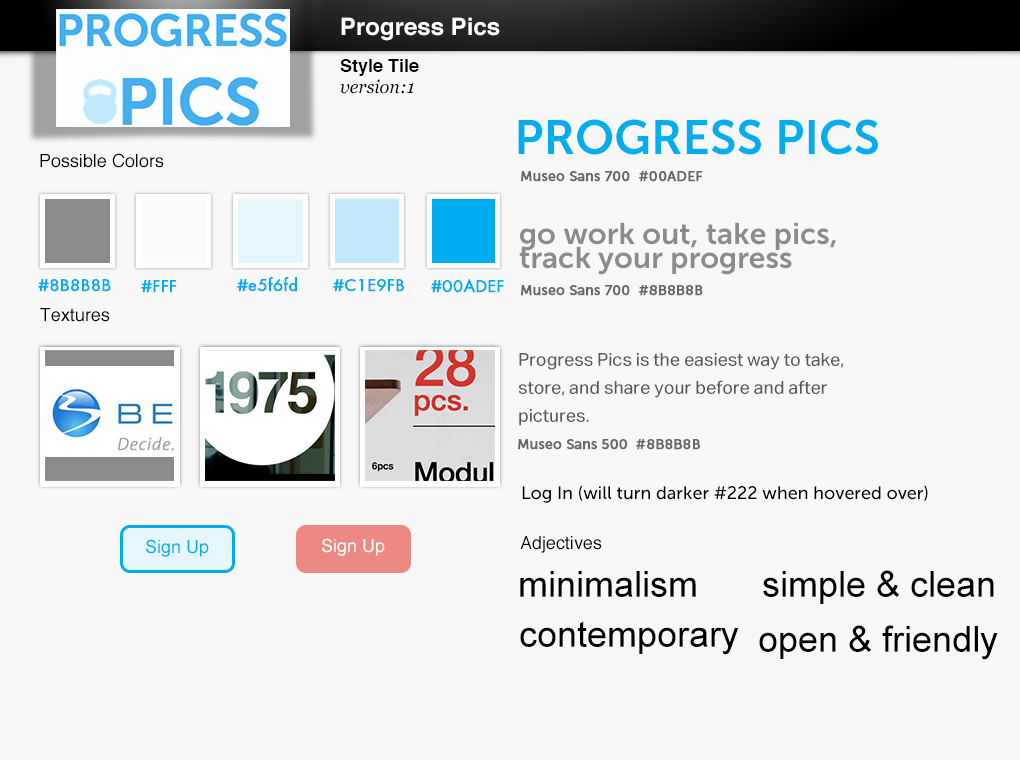
<style>
.page{position:relative;width:1020px;height:760px;background:#f8f8f8}
.page>*{position:absolute;margin:0}
.t1{font:24px "Helvetica-Bold";color:#ffffff}
.t2{font:18px "Helvetica-Bold";color:#000000}
.t3{font:18px "Georgia-Italic";color:#000000}
.t4{font:48px "MuseoSans-700";color:#00adef}
.t5{font:18px "Helvetica";color:#000000}
.t6{font:14px "MuseoSans-500";color:#666666;font-weight:bold}
.t7{font:30px/24px "MuseoSans-700";color:#8b8b8b}
.t8{font:18px "FuturaPT-Book";color:#00adef;font-weight:bold}
.t9{font:18px/28px "AktivGrotesk-Regular";color:#575757}
.t10{font:18px "MuseoSans-500";color:#000000}
.t11{font:18px "ArialMT";color:#00adef}
.t12{font:18px "ArialMT";color:#ffffff}
.t13{font:36px "ArialMT";color:#000000}
</style>
<div class="page">
<p class="t1" style="left:341px;top:17px;width:159px;height:24px">Progress Pics</p>
<p class="t2" style="left:340px;top:59px;width:79px;height:17px">Style Tile</p>
<p class="t3" style="left:340px;top:79px;width:74px;height:15px">version:1</p>
<p class="t4" style="left:518px;top:119px;width:360px;height:36px">PROGRESS PICS</p>
<p class="t5" style="left:40px;top:153px;width:124px;height:15px">Possible Colors</p>
<p class="t6" style="left:521px;top:171px;width:182px;height:11px">Museo Sans 700  #00ADEF</p>
<p class="t7" style="left:519px;top:222px;width:317px;height:53px">go work out, take pics,<br>track your progress</p>
<p class="t8" style="left:38px;top:279px;width:73px;height:13px">#8B8B8B</p>
<p class="t8" style="left:141px;top:280px;width:36px;height:13px">#FFF</p>
<p class="t8" style="left:237px;top:277px;width:60px;height:15px">#e5f6fd</p>
<p class="t8" style="left:333px;top:279px;width:71px;height:13px">#C1E9FB</p>
<p class="t8" style="left:431px;top:279px;width:73px;height:14px">#00ADEF</p>
<p class="t6" style="left:521px;top:285px;width:182px;height:11px">Museo Sans 700  #8B8B8B</p>
<p class="t5" style="left:40px;top:308px;width:70px;height:14px">Textures</p>
<p class="t9" style="left:518px;top:353px;width:326px;height:73px">Progress Pics is the easiest way to take, store, and share your before and after pictures.</p>
<p class="t6" style="left:518px;top:439px;width:182px;height:11px">Museo Sans 500  #8B8B8B</p>
<p class="t10" style="left:522px;top:485px;width:406px;height:18px">Log In (will turn darker #222 when hovered over)</p>
<p class="t11" style="left:146px;top:539px;width:63px;height:18px">Sign Up</p>
<p class="t12" style="left:322px;top:538px;width:63px;height:18px">Sign Up</p>
<p class="t5" style="left:520px;top:536px;width:82px;height:17px">Adjectives</p>
<p class="t13" style="left:520px;top:571px;width:176px;height:26px">minimalism</p>
<p class="t13" style="left:763px;top:570px;width:231px;height:34px">simple &amp; clean</p>
<p class="t13" style="left:520px;top:621px;width:219px;height:34px">contemporary</p>
<p class="t13" style="left:759px;top:625px;width:239px;height:35px">open &amp; friendly</p>
</div>
